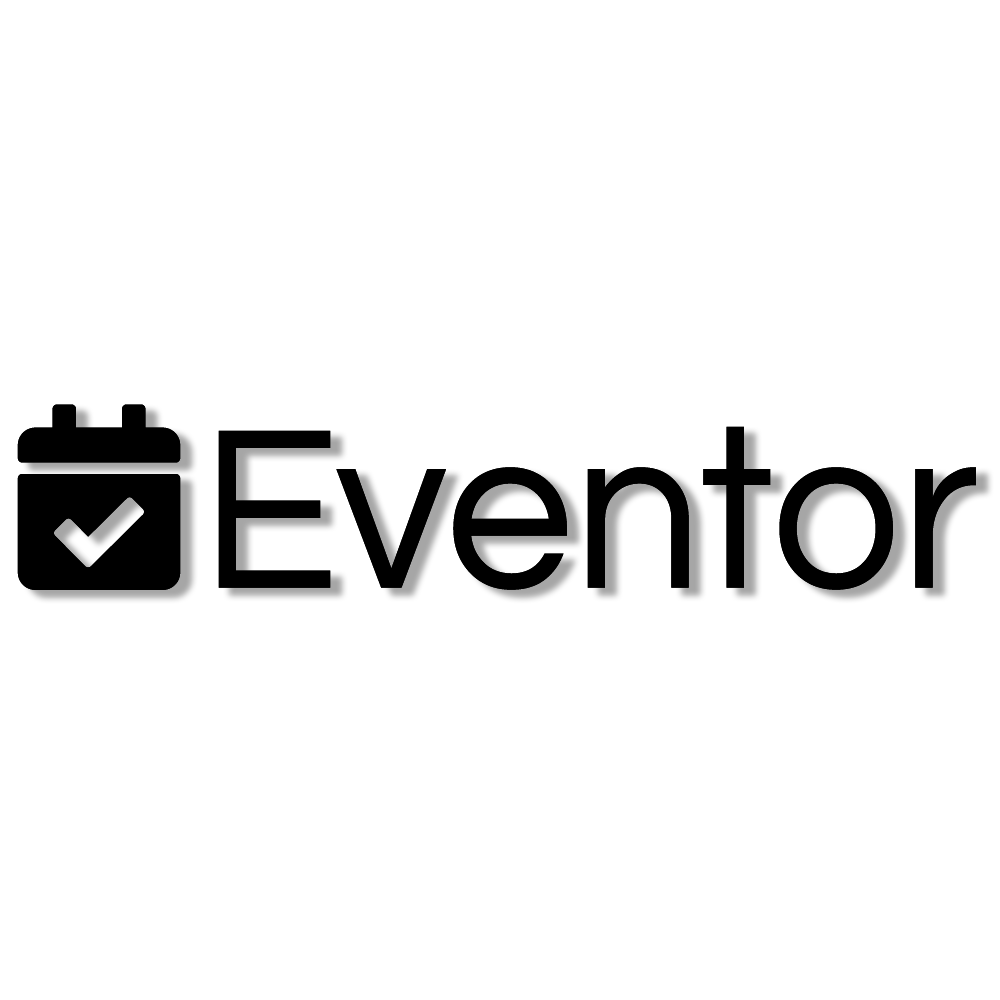
<style>
.page{position:relative;width:1000px;height:1000px;background:#ffffff}
.page>*{position:absolute;margin:0}
.t1{font:237.1px "Questrial-Regular";color:#000000;scale:0.96 1}
</style>
<div class="page">
<p class="t1" style="left:218px;top:426px;width:758px;height:164px">Eventor</p>
<p class="t1" style="left:218px;top:426px;width:758px;height:164px">Eventor</p>
</div>
